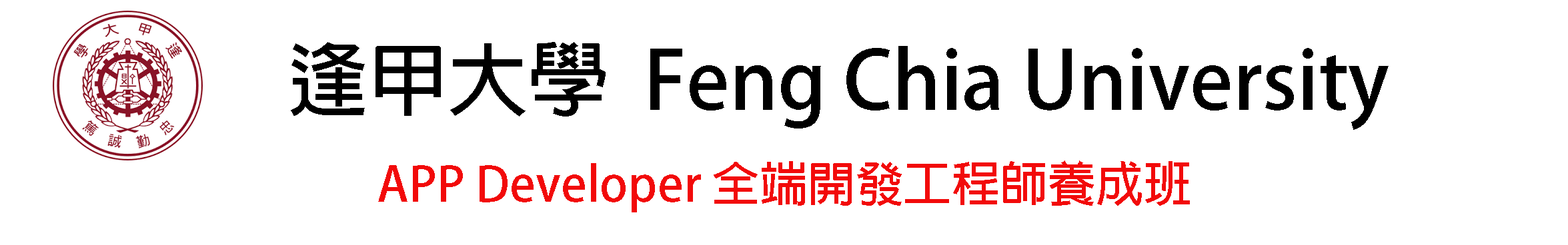
<style>
.page{position:relative;width:1568px;height:245px;background:#ffffff}
.page>*{position:absolute;margin:0}
.t1{font:80px "AdobeFanHeitiStd-Bold";color:#000000}
.t2{font:48px "AdobeFanHeitiStd-Bold";color:#f20a0a}
</style>
<div class="page">
<p class="t1" style="left:291px;top:42px;width:1098px;height:88px">逢甲大學  Feng Chia University</p>
<p class="t2" style="left:378px;top:161px;width:812px;height:52px">APP Developer 全端開發工程師養成班</p>
</div>
